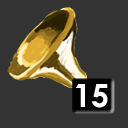
<style>
.page{position:relative;width:128px;height:128px;background:#333333}
.page>*{position:absolute;margin:0}
.t1{font:32px "CenturyGothic-Bold";color:#ffffff}
</style>
<div class="page">
<p class="t1" style="left:75px;top:84px;width:33px;height:24px">15</p>
</div>
